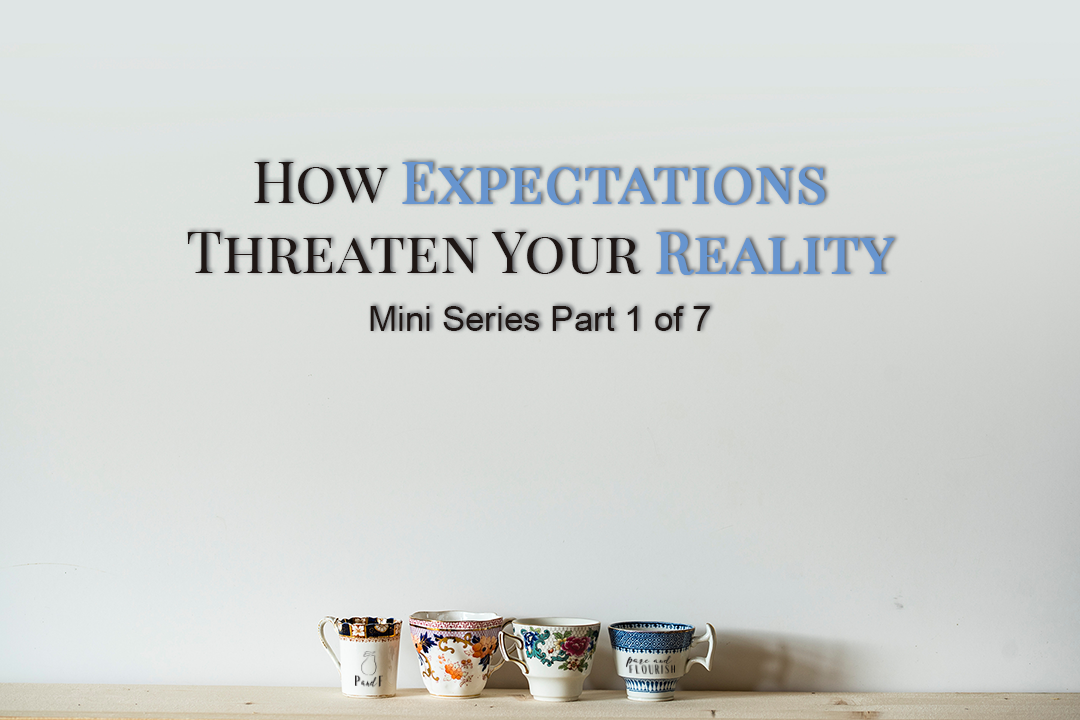
<style>
.page{position:relative;width:1080px;height:720px}
.page>*{position:absolute;margin:0}
.t1{font:35px "ArialMT";color:#1e1614}
.t2{font:58px "PlayfairDisplaySC-Regular";color:#1e1614}
.t3{font:58px "PlayfairDisplaySC-Regular";color:#6795cf;font-weight:bold}
</style>
<div class="page">
<p class="t1" style="left:187px;top:162px;width:708px;height:169px;text-align:center"><span class="t2">How </span><span class="t3">Expectations </span><span class="t2">Threaten Your </span><span class="t3">Reality<br><br></span>Mini Series Part 1 of 7</p>
</div>
